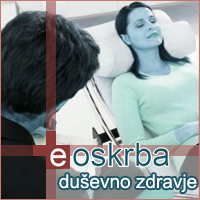
<style>
.page{position:relative;width:200px;height:200px}
.page>*{position:absolute;margin:0}
.t1{font:19px "ArialMT";color:#ffffff}
</style>
<div class="page">
<p class="t1" style="left:59px;top:174px;width:138px;height:18px">duševno zdravje</p>
</div>
